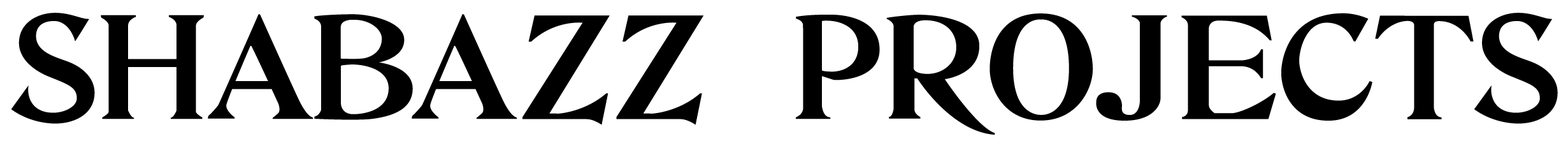
<style>
.page{position:relative;width:1568px;height:143px;background:#ffffff}
.page>*{position:absolute;margin:0}
.t1{font:138.1px "Shabazz-Regular";color:#000000;text-transform:uppercase}
</style>
<div class="page">
<p class="t1" style="left:11px;top:13px;width:1547px;height:121px">SHABAZZ PROJECTS</p>
</div>
